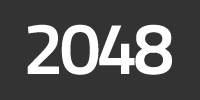
<style>
.page{position:relative;width:200px;height:100px;background:#333333}
.page>*{position:absolute;margin:0}
.t1{font:72.8px "Titillium-Semibold";letter-spacing:-0.055em;color:#ffffff}
</style>
<div class="page">
<p class="t1" style="left:27px;top:24px;width:145px;height:51px">2048</p>
</div>
